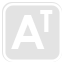
<style>
.page{position:relative;width:64px;height:64px;background:#e3e3e3}
.page>*{position:absolute;margin:0}
.t1{font:48px "CenturyGothic-Bold";color:#ffffff}
.t2{font:30px "CenturyGothic-Bold";color:#ffffff}
</style>
<div class="page">
<p class="t1" style="left:11px;top:15px;width:34px;height:34px">A</p>
<p class="t2" style="left:40px;top:10px;width:13px;height:22px">T</p>
</div>
